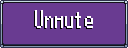
<style>
.page{position:relative;width:128px;height:48px;background:#693b91}
.page>*{position:absolute;margin:0}
.t1{font:24px "Terminal";color:#ffffff}
</style>
<div class="page">
<p class="t1" style="left:35px;top:10px;width:58px;height:18px">Unmute</p>
</div>
